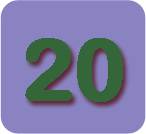
<style>
.page{position:relative;width:146px;height:134px;background:#8983c1}
.page>*{position:absolute;margin:0}
.t1{font:86.1px "ArialRoundedMTBold";letter-spacing:-0.01em;color:#356639;font-weight:bold}
</style>
<div class="page">
<p class="t1" style="left:25px;top:38px;width:98px;height:64px">20</p>
</div>
